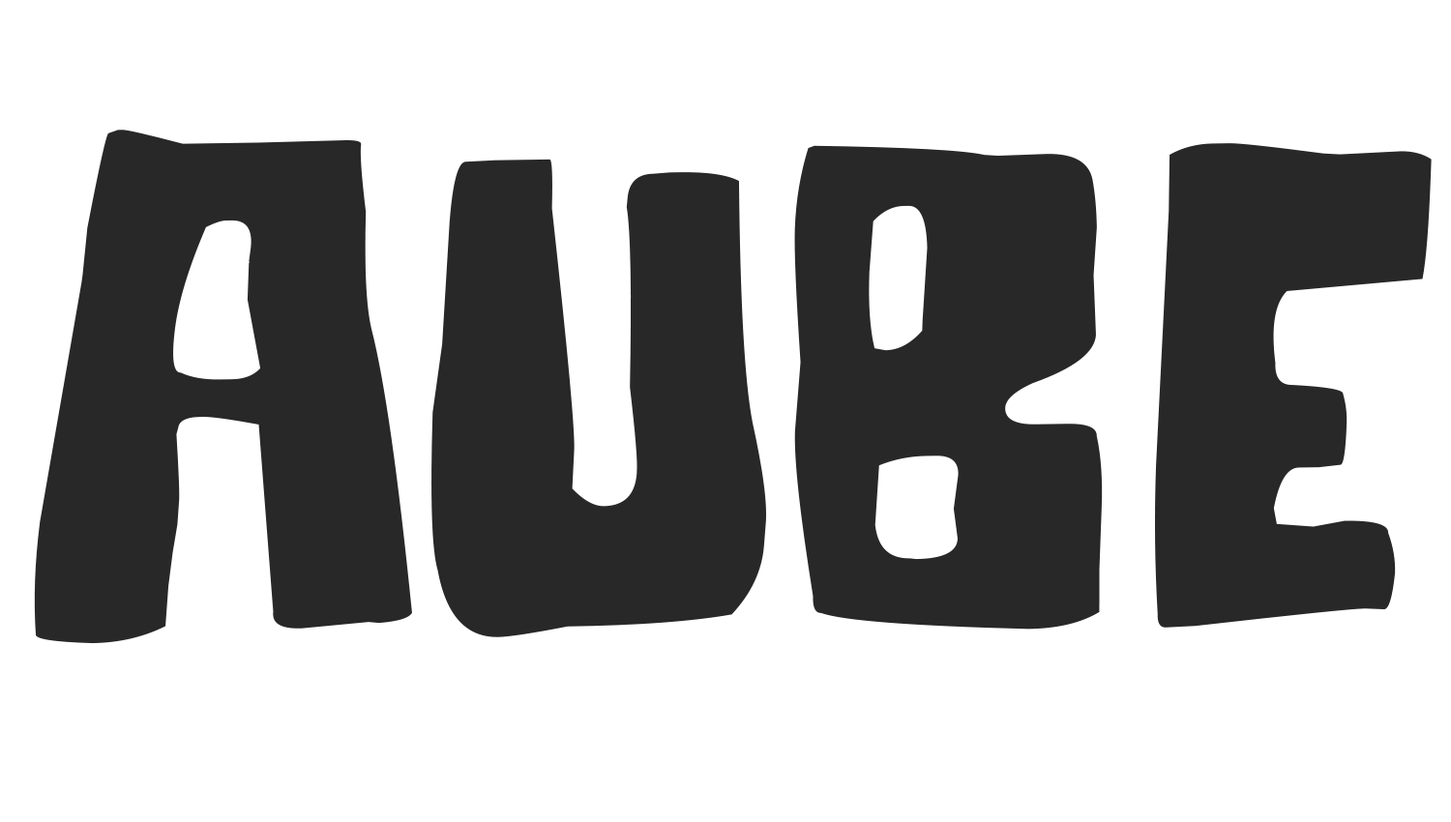
<style>
.page{position:relative;width:1451px;height:822px;background:#ffffff}
.page>*{position:absolute;margin:0}
.t1{font:543.2px "Jelek-Bold";color:#282828;scale:0.94 1}
.t2{font:543.2px "Jelek-Bold";letter-spacing:0.1em;color:#282828;scale:0.94 1}
</style>
<div class="page">
<p class="t1" style="left:34px;top:130px;width:1397px;height:514px;rotate:-1deg">Au<span class="t2">be</span></p>
</div>
